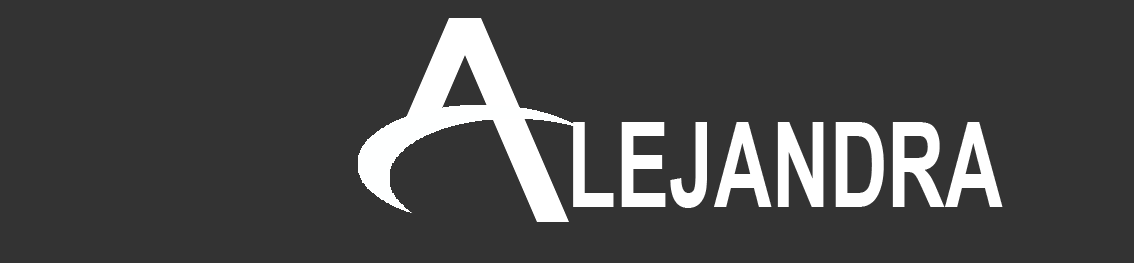
<style>
.page{position:relative;width:1134px;height:263px;background:#333333}
.page>*{position:absolute;margin:0}
.t1{font:119.1px "Arial-BoldMT";color:#ffffff;scale:0.67 1}
</style>
<div class="page">
<p class="t1" style="left:573px;top:122px;width:430px;height:86px">LEJANDRA</p>
</div>
